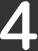
<style>
.page{position:relative;width:38px;height:51px;background:#333333}
.page>*{position:absolute;margin:0}
.t1{font:66.7px "RoundedMplus1c-Medium";color:#ffffff}
</style>
<div class="page">
<p class="t1" style="left:0px;top:1px;width:38px;height:49px">4</p>
</div>
